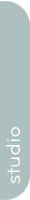
<style>
.page{position:relative;width:30px;height:200px;background:#adbfbf}
.page>*{position:absolute;margin:0}
.t1{font:20.4px "Bryant-Regular";color:#ffffff}
</style>
<div class="page">
<p class="t1" style="left:6px;top:127px;width:14px;height:57px;rotate:-90deg">studio</p>
</div>
